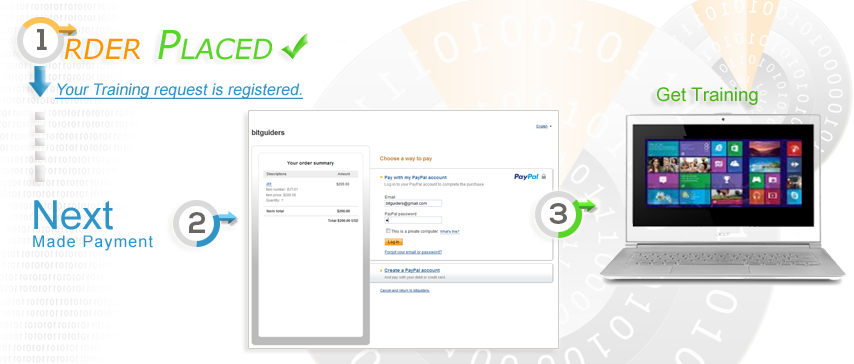
<style>
.page{position:relative;width:854px;height:364px;background:#ffffff}
.page>*{position:absolute;margin:0}
.t1{font:16px "ArialMT";color:#3094c6;font-style:italic;text-decoration:underline}
.t2{font:18.7px "ArialMT";color:#4db126}
.t3{font:40px "ArialMT";color:#3094c6}
.t4{font:16px "ArialMT";letter-spacing:0.075em;color:#3094c6}
</style>
<div class="page">
<p class="t1" style="left:55px;top:83px;width:248px;height:16px">Your Training request is registered.</p>
<p class="t2" style="left:657px;top:87px;width:101px;height:18px">Get Training</p>
<p class="t3" style="left:34px;top:200px;width:79px;height:30px">Next</p>
<p class="t4" style="left:33px;top:235px;width:120px;height:16px">Made Payment</p>
</div>
